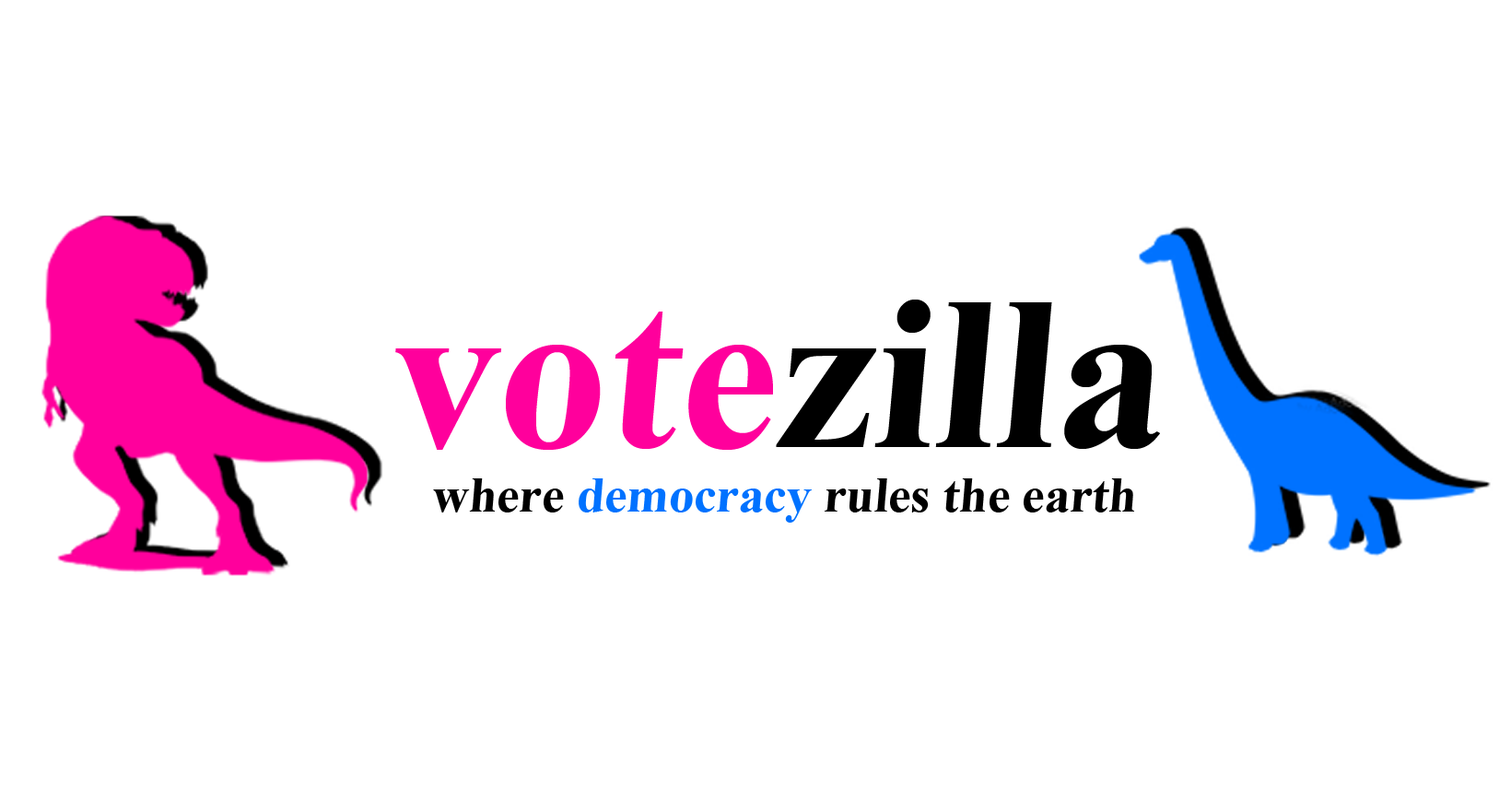
<style>
.page{position:relative;width:1511px;height:789px;background:#ffffff}
.page>*{position:absolute;margin:0}
.t1{font:219.7px "TimesNewRomanPS-BoldMT";color:#000000}
.t2{font:219.7px "TimesNewRomanPS-BoldMT";color:#ff009c}
.t3{font:50.5px "TimesNewRomanPS-BoldMT";color:#000000}
.t4{font:50.5px "TimesNewRomanPS-BoldMT";color:#0072ff}
</style>
<div class="page">
<p class="t1" style="left:395px;top:300px;width:765px;height:150px"><span class="t2">vote</span>zilla</p>
<p class="t3" style="left:433px;top:478px;width:702px;height:45px">where <span class="t4">democracy</span> rules the earth</p>
</div>
